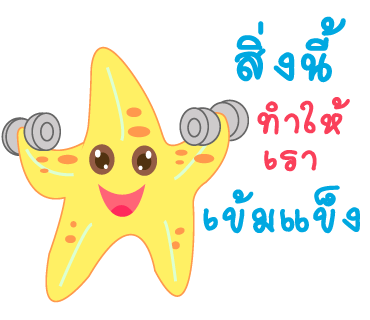
<style>
.page{position:relative;width:370px;height:320px;background:#ffffff}
.page>*{position:absolute;margin:0}
.t1{font:79px "2005_iannnnnMTV";letter-spacing:0.025em;color:#00a8e1;scale:1.06 1}
.t2{font:59px "2005_iannnnnMTV";letter-spacing:0.025em;color:#fa405a;scale:1.06 1}
.t3{font:68px "2005_iannnnnMTV";letter-spacing:0.025em;color:#00a8e1;scale:1.06 1}
</style>
<div class="page">
<p class="t1" style="left:234px;top:16px;width:112px;height:67px">สิ่งนี้</p>
<p class="t2" style="left:257px;top:97px;width:93px;height:38px">ทำให้</p>
<p class="t2" style="left:264px;top:150px;width:53px;height:22px">เรา</p>
<p class="t3" style="left:203px;top:185px;width:157px;height:49px">เข้มแข็ง</p>
</div>
